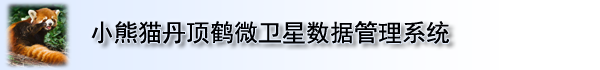
<style>
.page{position:relative;width:600px;height:70px}
.page>*{position:absolute;margin:0}
.t1{font:24px "SimHei";color:#000002}
</style>
<div class="page">
<p class="t1" style="left:91px;top:21px;width:359px;height:23px">小熊猫丹顶鹤微卫星数据管理系统</p>
</div>
